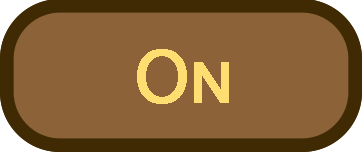
<style>
.page{position:relative;width:363px;height:152px;background:#8c6239}
.page>*{position:absolute;margin:0}
.t1{font:72px "ArialMT";letter-spacing:-0.025em;color:#fede70;font-variant:small-caps;font-weight:bold}
</style>
<div class="page">
<p class="t1" style="left:137px;top:49px;width:92px;height:55px">On</p>
</div>
